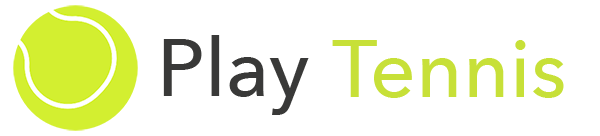
<style>
.page{position:relative;width:600px;height:136px;background:#ffffff}
.page>*{position:absolute;margin:0}
.t1{font:80.6px "AvenirNext-Medium";color:#393938}
.t2{font:80.6px "AvenirNext-Medium";color:#c7e038}
</style>
<div class="page">
<p class="t1" style="left:163px;top:35px;width:146px;height:80px">Play</p>
<p class="t2" style="left:332px;top:40px;width:232px;height:58px">Tennis</p>
</div>
